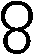
<style>
.page{position:relative;width:35px;height:56px;background:#ffffff}
.page>*{position:absolute;margin:0}
.t1{font:66px "OPPOSans-R";color:#000000}
</style>
<div class="page">
<p class="t1" style="left:1px;top:1px;width:32px;height:53px;rotate:180deg">8</p>
</div>
